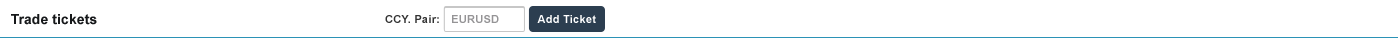
<style>
.page{position:relative;width:1398px;height:38px;background:#ffffff}
.page>*{position:absolute;margin:0}
.t1{font:14px "Arial-BoldMT";letter-spacing:0.007em;color:#16181a}
.t2{font:11px "Arial-BoldMT";letter-spacing:0.025em;color:#333333}
.t3{font:11px "Arial-BoldMT";letter-spacing:0.025em;color:#959496}
.t4{font:11px "Arial-BoldMT";letter-spacing:0.025em;color:#ffffff}
</style>
<div class="page">
<p class="t1" style="left:11px;top:14px;width:86px;height:11px">Trade tickets</p>
<p class="t2" style="left:385px;top:15px;width:54px;height:8px">CCY. Pair:</p>
<p class="t3" style="left:452px;top:15px;width:47px;height:8px">EURUSD</p>
<p class="t4" style="left:537px;top:15px;width:59px;height:8px">Add Ticket</p>
</div>
